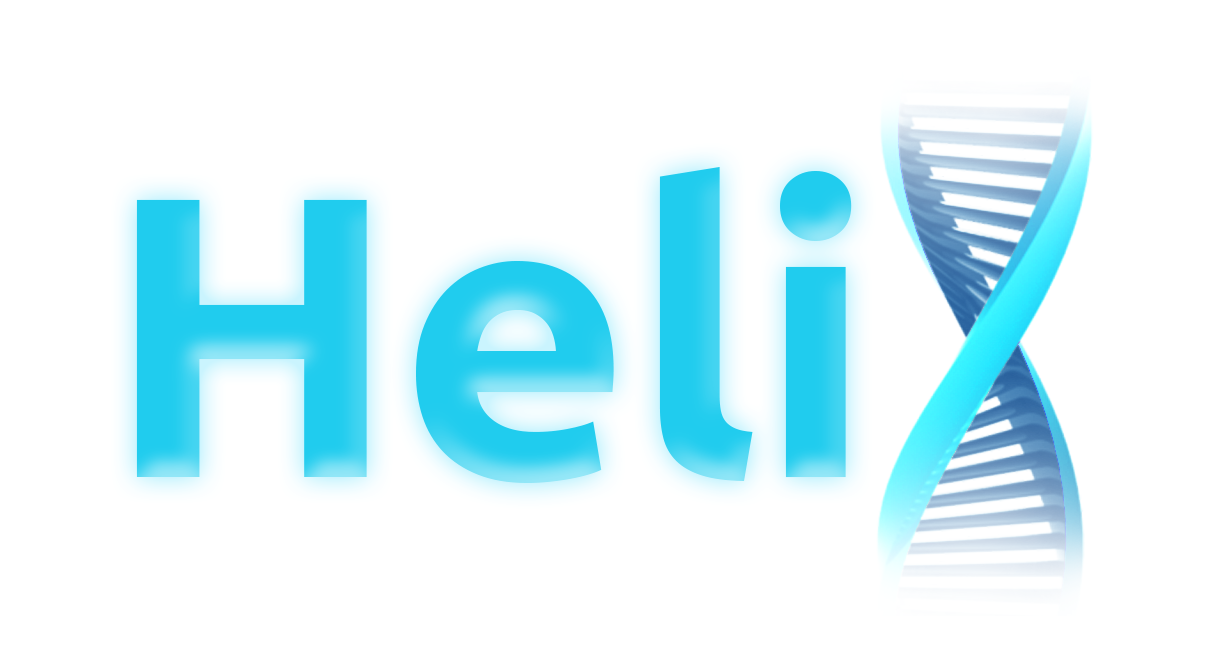
<style>
.page{position:relative;width:1220px;height:669px;background:#ffffff}
.page>*{position:absolute;margin:0}
.t1{font:400px "Ubuntu-Bold";color:#20ccee}
</style>
<div class="page">
<p class="t1" style="left:136px;top:166px;width:716px;height:317px">Heli</p>
</div>
